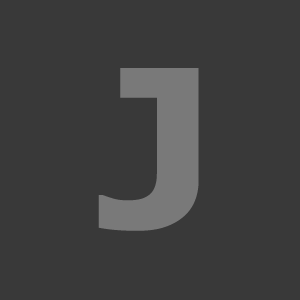
<style>
.page{position:relative;width:300px;height:300px;background:#393939}
.page>*{position:absolute;margin:0}
.t1{font:220px "Verdana-Bold";letter-spacing:-0.02em;color:#797979}
</style>
<div class="page">
<p class="t1" style="left:98px;top:68px;width:101px;height:163px">J</p>
</div>
